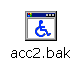
<style>
.page{position:relative;width:80px;height:80px;background:#ffffff}
.page>*{position:absolute;margin:0}
.t1{font:14px "MSReferenceSansSerif";color:#000000}
</style>
<div class="page">
<p class="t1" style="left:11px;top:47px;width:59px;height:11px">acc2.bak</p>
</div>
